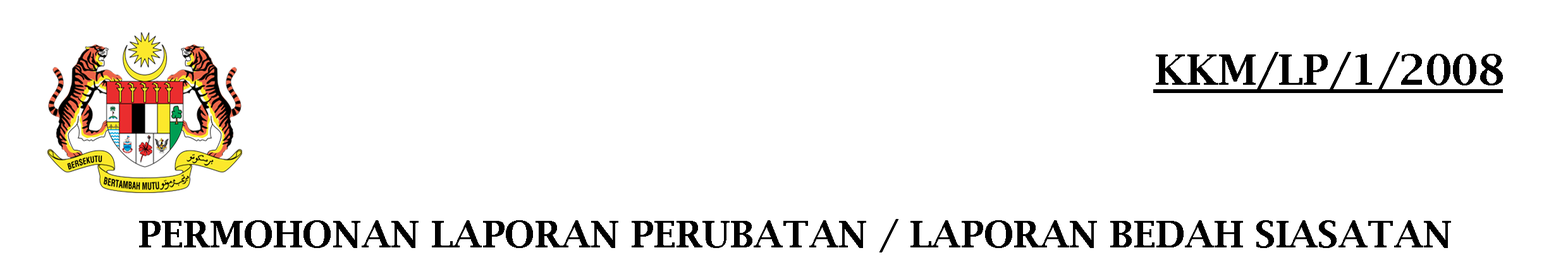
<style>
.page{position:relative;width:1568px;height:274px;background:#ffffff}
.page>*{position:absolute;margin:0}
.t1{font:42.2px "LucidaBright-Demi";color:#000000}
.t2{font:36.9px "LucidaBright-Demi";color:#000000}
</style>
<div class="page">
<p class="t1" style="left:1156px;top:52px;width:347px;height:39px">KKM/LP/1/2008</p>
<p class="t2" style="left:139px;top:219px;width:1312px;height:33px">PERMOHONAN LAPORAN PERUBATAN / LAPORAN BEDAH SIASATAN</p>
</div>
